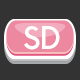
<style>
.page{position:relative;width:80px;height:80px;background:#333333}
.page>*{position:absolute;margin:0}
.t1{font:29.9px "HKExplorerSharp-Medium";letter-spacing:-0.035em;color:#ffffff}
</style>
<div class="page">
<p class="t1" style="left:24px;top:26px;width:36px;height:24px">SD</p>
</div>
